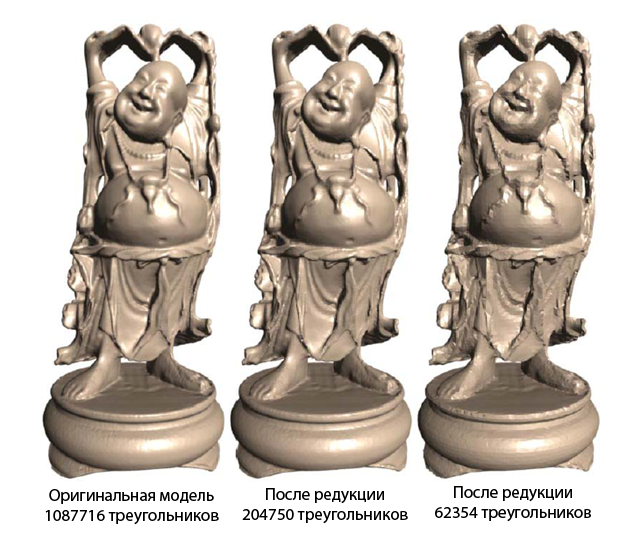
<style>
.page{position:relative;width:617px;height:540px;background:#ffffff}
.page>*{position:absolute;margin:0}
.t1{font:17px "MyriadPro-Regular";color:#000000}
</style>
<div class="page">
<p class="t1" style="left:435px;top:486px;width:156px;height:36px;text-align:center">После редукции<br>62354 треугольников</p>
<p class="t1" style="left:45px;top:489px;width:174px;height:36px;text-align:center">Оригинальная модель<br>1087716 треугольников</p>
<p class="t1" style="left:242px;top:488px;width:166px;height:36px;text-align:center">После редукции<br>204750 треугольников</p>
</div>
